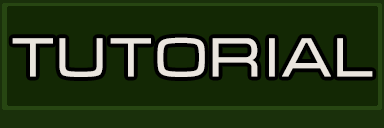
<style>
.page{position:relative;width:384px;height:128px;background:#132804}
.page>*{position:absolute;margin:0}
.t1{font:56px "Micra";color:#eae5de}
</style>
<div class="page">
<p class="t1" style="left:12px;top:37px;width:361px;height:40px">TUTORIAL</p>
</div>
